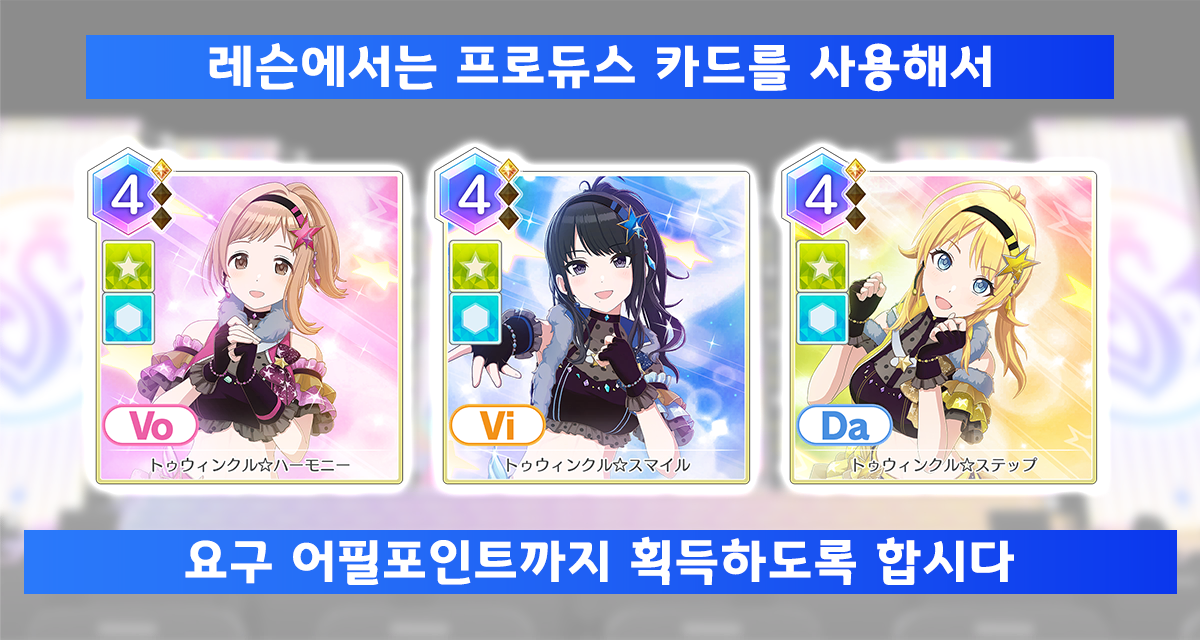
<style>
.page{position:relative;width:1200px;height:640px}
.page>*{position:absolute;margin:0}
.t1{font:50.7px "GyeonggiTitleB";letter-spacing:0.05em;color:#ffffff}
</style>
<div class="page">
<p class="t1" style="left:209px;top:43px;width:782px;height:49px">레슨에서는 프로듀스 카드를 사용해서</p>
<p class="t1" style="left:185px;top:536px;width:829px;height:49px">요구 어필포인트까지 획득하도록 합시다</p>
</div>
